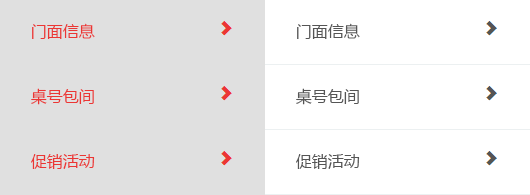
<style>
.page{position:relative;width:530px;height:195px;background:#e0e0e0}
.page>*{position:absolute;margin:0}
.t1{font:16px "MicrosoftYaHei";color:#eb3634}
.t2{font:16px "MicrosoftYaHei";color:#555555}
</style>
<div class="page">
<p class="t1" style="left:32px;top:23px;width:63px;height:16px">门面信息</p>
<p class="t2" style="left:297px;top:23px;width:63px;height:16px">门面信息</p>
<p class="t1" style="left:31px;top:88px;width:63px;height:17px">桌号包间</p>
<p class="t2" style="left:296px;top:88px;width:63px;height:17px">桌号包间</p>
<p class="t1" style="left:31px;top:154px;width:64px;height:15px">促销活动</p>
<p class="t2" style="left:296px;top:154px;width:64px;height:15px">促销活动</p>
</div>
